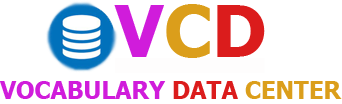
<style>
.page{position:relative;width:342px;height:104px;background:#ffffff}
.page>*{position:absolute;margin:0}
.t1{font:72px "Tahoma-Bold";color:#d01cdb}
.t2{font:72px "Tahoma-Bold";color:#db9e1b}
.t3{font:72px "Tahoma-Bold";color:#db1c1c}
.t4{font:24px "Tahoma-Bold";color:#d01cdb}
.t5{font:24px "Tahoma-Bold";color:#db1c1c}
.t6{font:24px "Tahoma-Bold";color:#db9e1b}
</style>
<div class="page">
<p class="t1" style="left:114px;top:4px;width:151px;height:54px">V<span class="t2">C</span><span class="t3">D</span></p>
<p class="t4" style="left:0px;top:81px;width:342px;height:18px">VOCABULARY <span class="t5">DATA </span><span class="t6">CENTER</span></p>
</div>
